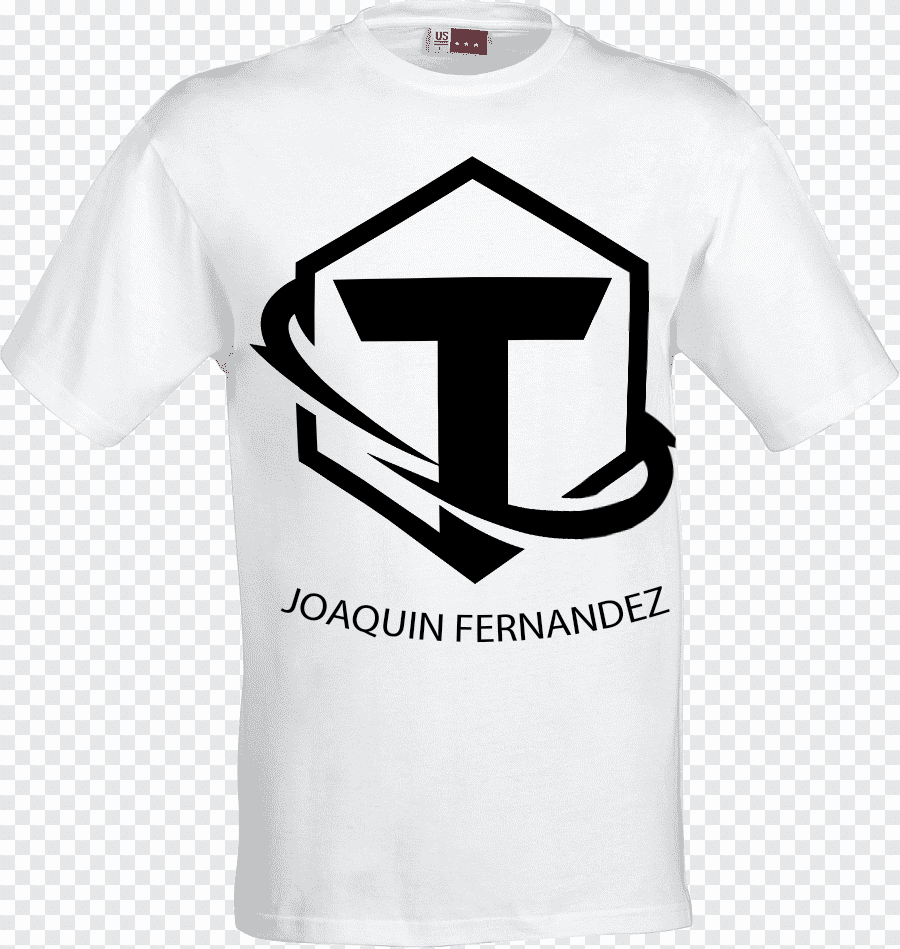
<style>
.page{position:relative;width:900px;height:949px;background:#e6e7e8}
.page>*{position:absolute;margin:0}
.t1{font:40px "MyriadPro-Regular";color:#000000}
</style>
<div class="page">
<p class="t1" style="left:280px;top:585px;width:390px;height:58px">JOAQUIN FERNANDEZ</p>
</div>
